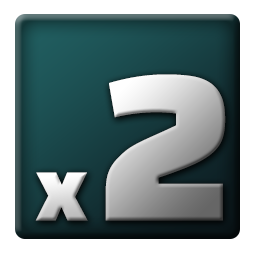
<style>
.page{position:relative;width:256px;height:256px;background:#ffffff}
.page>*{position:absolute;margin:0}
.t1{font:228px "BlackHanSans-Regular"}
.t2{font:80px "BlackHanSans-Regular"}
</style>
<div class="page">
<p class="t1" style="left:105px;top:74px;width:121px;height:147px">2</p>
<p class="t2" style="left:35px;top:172px;width:53px;height:49px">x</p>
</div>
